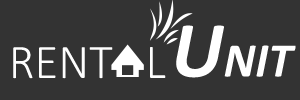
<style>
.page{position:relative;width:300px;height:100px;background:#333333}
.page>*{position:absolute;margin:0}
.t1{font:48.6px "Calibri-BoldItalic";color:#ffffff}
.t2{font:80.1px "Calibri-BoldItalic";color:#ffffff}
.t3{font:48.6px "Calibri-Light";color:#fefefe}
</style>
<div class="page">
<p class="t1" style="left:176px;top:25px;width:120px;height:53px"><span class="t2">U</span>NIT</p>
<p class="t3" style="left:13px;top:47px;width:153px;height:32px">RENT   L</p>
</div>
